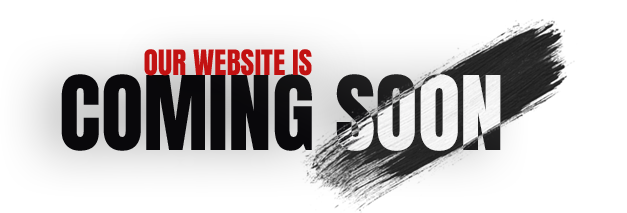
<style>
.page{position:relative;width:627px;height:213px;background:#ffffff}
.page>*{position:absolute;margin:0}
.t1{font:29.7px "Anton-Regular";color:#c21212;text-transform:uppercase}
.t2{font:87.3px "Anton-Regular";color:#1a1a1a;text-transform:uppercase}
.t3{font:87.3px "Anton-Regular";text-transform:uppercase}
</style>
<div class="page">
<p class="t1" style="left:144px;top:49px;width:168px;height:27px">Our website is</p>
<p class="t2" style="left:61px;top:74px;width:440px;height:77px">Coming soon</p>
<p class="t3" style="left:61px;top:74px;width:440px;height:77px">Coming soon</p>
</div>
